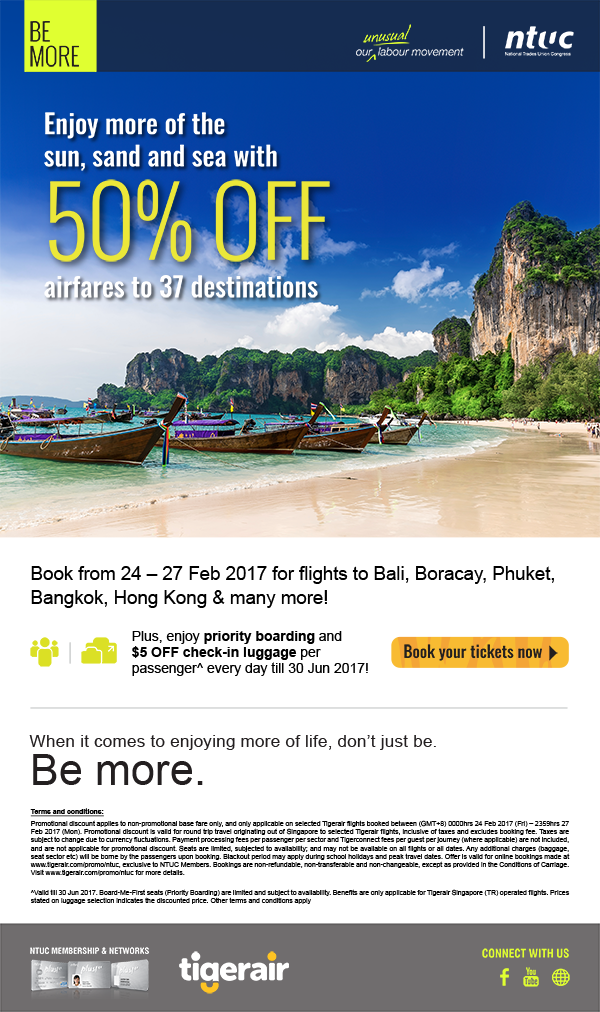
<style>
.page{position:relative;width:600px;height:1012px;background:#ffffff}
.page>*{position:absolute;margin:0}
.t1{font:24px/24.9px "Oswald-Light";color:#231f20}
.t2{font:27px "Oswald-Medium";color:#ffffff}
.t3{font:93.5px "Oswald-Light";color:#ebe739}
.t4{font:18.9px/24.9px "ArialMT";letter-spacing:-0.005em;color:#000000}
.t5{font:13.9px/16.3px "ArialMT";color:#000000}
.t6{font:13.9px/16.3px "Arial-BoldMT";color:#000000}
.t7{font:16.2px "Oswald-Medium";color:#221f1f}
.t8{font:17.2px "ArialMT";letter-spacing:0.01em;color:#231f20}
.t9{font:43.4px "ArialMT";color:#231f20}
.t10{font:6.9px "ArialMT";color:#000000}
.t11{font:6.9px "Arial-BoldMT";color:#000000;text-decoration:underline}
.t12{font:8.4px "Helvetica-CondensedBold";color:#ffffff;text-transform:uppercase}
.t13{font:11.1px "Helvetica-CondensedBold";color:#e0ff31;text-transform:uppercase}
</style>
<div class="page">
<p class="t1" style="left:30px;top:21px;width:49px;height:46px">BE<br>MORE</p>
<p class="t2" style="left:44px;top:112px;width:233px;height:59px">Enjoy more of the<br>sun, sand and sea with</p>
<p class="t3" style="left:49px;top:179px;width:281px;height:83px">50% OFF</p>
<p class="t2" style="left:44px;top:275px;width:274px;height:23px">airfares to 37 destinations</p>
<p class="t4" style="left:31px;top:566px;width:523px;height:42px">Book from 24 – 27 Feb 2017 for flights to Bali, Boracay, Phuket, Bangkok, Hong Kong &amp; many more!</p>
<p class="t5" style="left:132px;top:631px;width:236px;height:45px">Plus, enjoy <span class="t6">priority boarding</span> and <br><span class="t6">$5 OFF check-in luggage</span> per passenger^ every day till 30 Jun 2017!</p>
<p class="t7" style="left:404px;top:644px;width:138px;height:17px">Book your tickets now</p>
<p class="t8" style="left:29px;top:735px;width:407px;height:50px;text-align:justify">When it comes to enjoying more of life, don’t just be. <br><span class="t9">Be more.</span></p>
<p class="t10" style="left:30px;top:808px;width:540px;height:96px;text-align:justify"><span class="t11">Terms and conditions:<br></span>Promotional discount applies to non-promotional base fare only, and only applicable on selected Tigerair flights booked between (GMT+8) 0000hrs 24 Feb 2017 (Fri) – 2359hrs 27 Feb 2017 (Mon). Promotional discount is valid for round trip travel originating out of Singapore to selected Tigerair flights, inclusive of taxes and excludes booking fee. Taxes are subject to change due to currency fluctuations. Payment processing fees per passenger per sector and Tigerconnect fees per guest per journey (where applicable) are not included, and are not applicable for promotional discount. Seats are limited, subjected to availability; and may not be available on all flights or all dates. Any additional charges (baggage, seat sector etc) will be borne by the passengers upon booking. Blackout period may apply during school holidays and peak travel dates. Offer is valid for online bookings made at www.tigerair.com/promo/ntuc, exclusive to NTUC Members. Bookings are non-refundable, non-transferable and non-changeable, except as provided in the Conditions of Carriage. Visit www.tigerair.com/promo/ntuc for more details.<br><br>^Valid till 30 Jun 2017. Board-Me-First seats (Priority Boarding) are limited and subject to availability. Benefits are only applicable for Tigerair Singapore (TR) operated flights. Prices stated on luggage selection indicates the discounted price. Other terms and conditions apply</p>
<p class="t12" style="left:30px;top:947px;width:119px;height:7px">NTUC Membership &amp; Networks</p>
<p class="t13" style="left:482px;top:948px;width:87px;height:10px">Connect with us</p>
</div>
